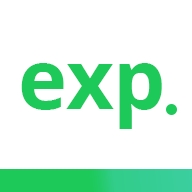
<style>
.page{position:relative;width:192px;height:192px;background:#ffffff}
.page>*{position:absolute;margin:0}
.t1{font:82.7px "NotoSans-Bold";color:#1cc959}
</style>
<div class="page">
<p class="t1" style="left:21px;top:63px;width:141px;height:66px">exp</p>
</div>
